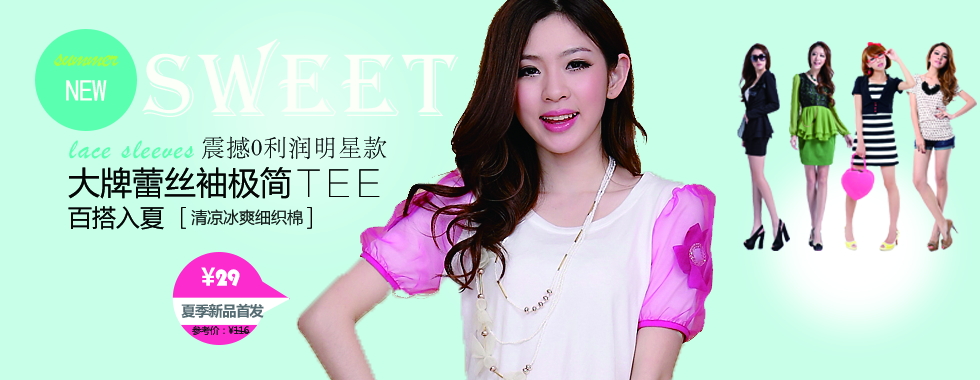
<style>
.page{position:relative;width:980px;height:380px;background:#c7ffe9}
.page>*{position:absolute;margin:0}
.t1{font:92px "Algerian";letter-spacing:0.06em;color:#fcfef8}
.t2{font:30px "STXingkai";letter-spacing:-0.05em;color:#a7ff3f}
.t3{font:30px "SimHei";letter-spacing:-0.05em;color:#fcfef8}
.t4{font:24px "STSong";letter-spacing:0.04em;color:#090d0d}
.t5{font:30px "STXingkai";letter-spacing:0.06em;color:#5bffb0}
.t6{font:32px "MicrosoftYaHei";color:#040606}
.t7{font:36px "FZLTCXHJW--GB1-0";letter-spacing:0.075em;color:#040606;font-weight:bold}
.t8{font:24px "MicrosoftYaHei";color:#040606}
.t9{font:16px "MicrosoftYaHei";color:#040606}
.t10{font:24.1px "STHupo";letter-spacing:-0.05em;color:#ffffff}
.t11{font:24.1px "MicrosoftYaHei-Bold";letter-spacing:-0.05em;color:#ffffff}
.t12{font:14.4px "MicrosoftYaHei-Bold";letter-spacing:-0.05em;color:#556b73}
.t13{font:9.6px "MicrosoftYaHei";letter-spacing:-0.05em;color:#080b0b}
</style>
<div class="page">
<p class="t1" style="left:142px;top:38px;width:317px;height:79px">SWEET</p>
<p class="t2" style="left:54px;top:54px;width:65px;height:13px">summer</p>
<p class="t3" style="left:66px;top:80px;width:41px;height:21px">NEW</p>
<p class="t4" style="left:202px;top:136px;width:185px;height:24px">震撼0利润明星款</p>
<p class="t5" style="left:69px;top:140px;width:125px;height:19px">lace sleeves</p>
<p class="t6" style="left:68px;top:167px;width:223px;height:32px">大牌蕾丝袖极简</p>
<p class="t7" style="left:297px;top:169px;width:83px;height:28px">TEE</p>
<p class="t8" style="left:68px;top:206px;width:96px;height:24px">百搭入夏</p>
<p class="t9" style="left:191px;top:209px;width:112px;height:17px;opacity:0.79">清凉冰爽细织棉</p>
<p class="t10" style="left:201px;top:267px;width:39px;height:20px"><span class="t11">¥</span>29</p>
<p class="t12" style="left:181px;top:303px;width:83px;height:15px">夏季新品首发</p>
<p class="t13" style="left:192px;top:325px;width:57px;height:10px">参考价：¥116</p>
</div>
